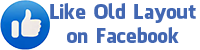
<style>
.page{position:relative;width:200px;height:50px;background:#ffffff}
.page>*{position:absolute;margin:0}
.t1{font:20px "FacebookLetterFaces";color:#4267b2}
</style>
<div class="page">
<p class="t1" style="left:50px;top:3px;width:146px;height:40px;text-align:center">Like Old Layout<br>on Facebook</p>
</div>
